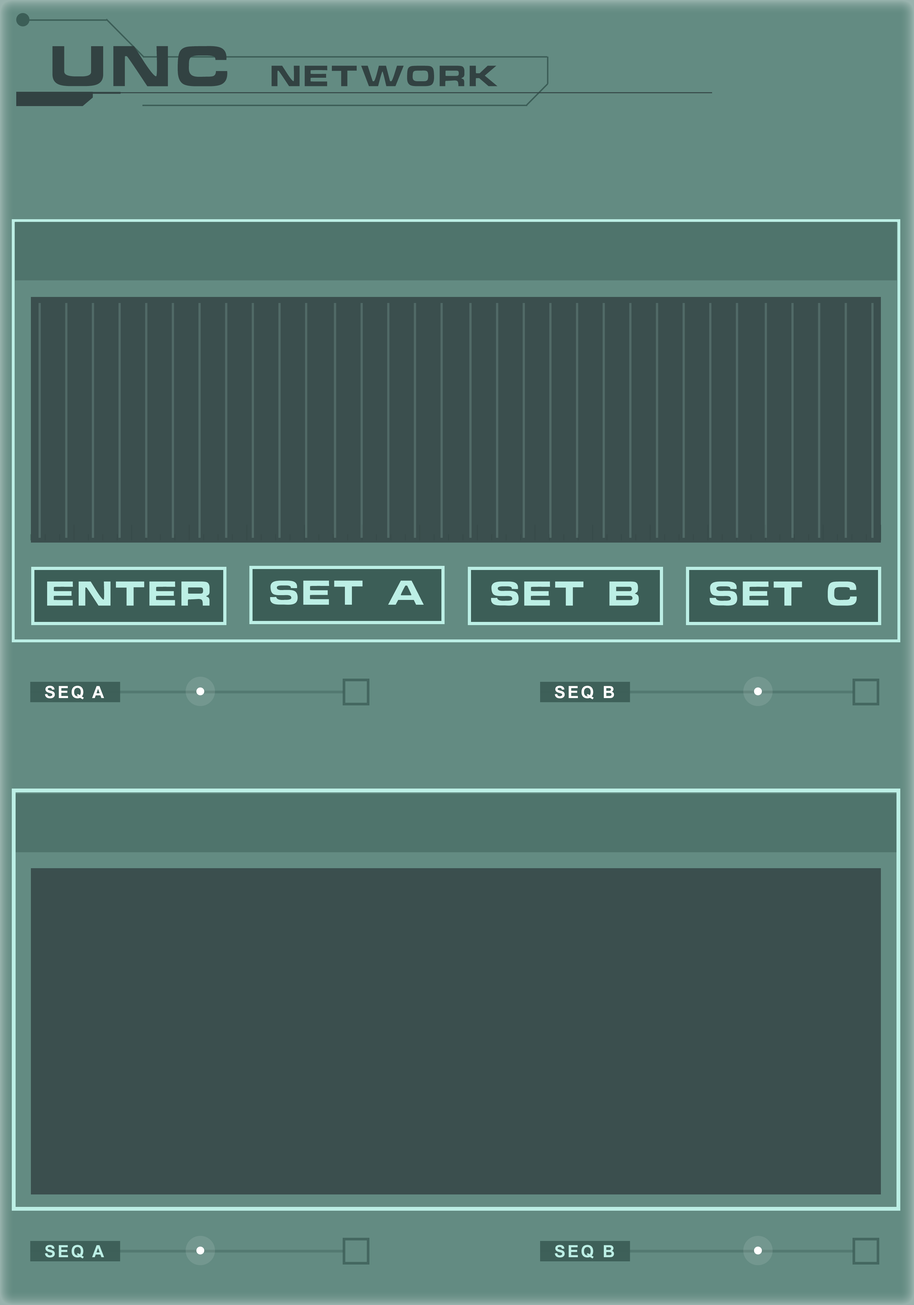
<style>
.page{position:relative;width:914px;height:1305px;background:#3b4f4e}
.page>*{position:absolute;margin:0}
.t1{font:26.9px "ChinoCapsSSK";letter-spacing:0.12em;color:#324242}
.t2{font:52.4px "ChinoCapsSSK";letter-spacing:0.12em;color:#324242}
.t3{font:31.6px "ChinoCapsSSK";letter-spacing:0.12em;color:#bcefe5}
.t4{font:16.8px "Arial-BoldMT";letter-spacing:0.12em;color:#ffffff}
.t5{font:16.8px "Arial-BoldMT";letter-spacing:0.12em;color:#bcefe5}
</style>
<div class="page">
<p class="t1" style="left:52px;top:46px;width:445px;height:40px"><span class="t2">UNC </span>NETWORK</p>
<p class="t3" style="left:47px;top:581px;width:163px;height:24px">ENTER</p>
<p class="t3" style="left:270px;top:580px;width:154px;height:24px">SET A</p>
<p class="t3" style="left:491px;top:581px;width:148px;height:24px">SET B</p>
<p class="t3" style="left:710px;top:581px;width:147px;height:24px">SET C</p>
<p class="t4" style="left:45px;top:685px;width:59px;height:14px">SEQ A</p>
<p class="t4" style="left:555px;top:685px;width:59px;height:14px">SEQ B</p>
<p class="t5" style="left:45px;top:1244px;width:59px;height:14px">SEQ A</p>
<p class="t5" style="left:555px;top:1244px;width:59px;height:14px">SEQ B</p>
</div>
